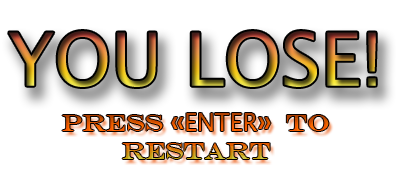
<style>
.page{position:relative;width:400px;height:180px;background:#ffffff}
.page>*{position:absolute;margin:0}
.t1{font:73.3px "LucidaSansUnicode"}
.t2{font:24px "EngraversMT"}
.t3{font:24px "LucidaSans"}
</style>
<div class="page">
<p class="t1" style="left:9px;top:31px;width:367px;height:56px">YOU LOSE!</p>
<p class="t2" style="left:62px;top:113px;width:267px;height:46px;text-align:center">Press «<span class="t3">ENTER</span>»  to Restart</p>
</div>
